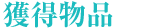
<style>
.page{position:relative;width:154px;height:28px;background:#ffffff}
.page>*{position:absolute;margin:0}
.t1{font:28px "RyuminPr6N-ExBold";color:#1cbcbf}
</style>
<div class="page">
<p class="t1" style="left:3px;top:1px;width:110px;height:27px">獲得物品</p>
</div>
